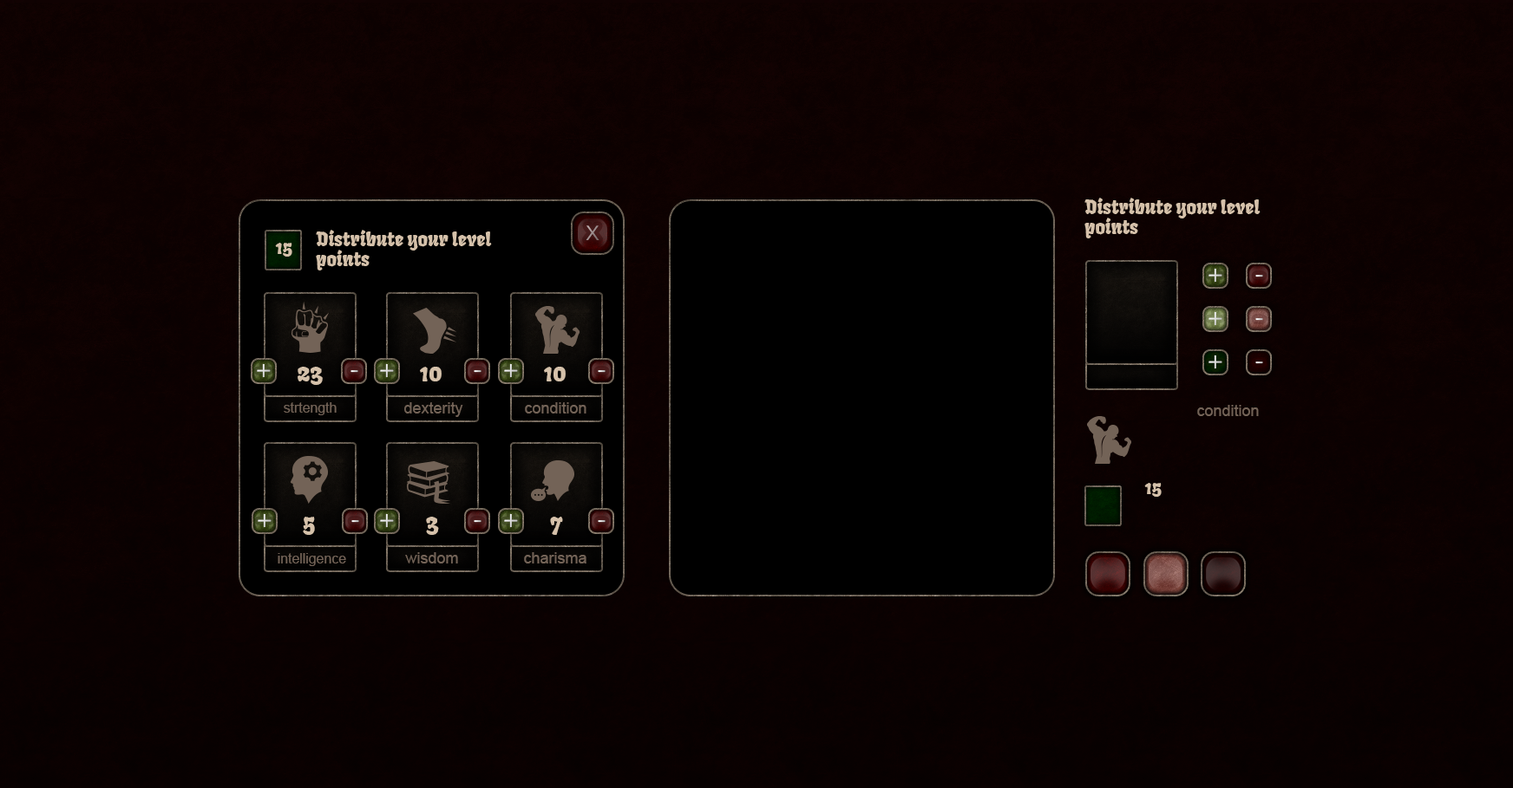
<style>
.page{position:relative;width:1513px;height:788px}
.page>*{position:absolute;margin:0}
.t1{font:19.1px/19.6px "Fruktur-Regular";color:#d5c1aa}
.t2{font:19.2px "Fruktur-Regular";color:#d5c1aa}
.t3{font:26.4px "Kalinga";color:#e0e0e0}
.t4{font:26.4px "Kalinga"}
.t5{font:24.3px "Fruktur-Regular";color:#d5c1aa}
.t6{font:13.9px "ArialMT";color:#736357}
.t7{font:15.6px "ArialMT";color:#736357}
</style>
<div class="page">
<p class="t1" style="left:1084px;top:198px;width:176px;height:41px">Distribute your level<br>points</p>
<p class="t1" style="left:316px;top:230px;width:176px;height:41px">Distribute your level<br>points</p>
<p class="t2" style="left:275px;top:243px;width:17px;height:14px">15</p>
<p class="t3" style="left:1208px;top:268px;width:14px;height:15px">+</p>
<p class="t4" style="left:1255px;top:275px;width:8px;height:3px">-</p>
<p class="t3" style="left:1208px;top:311px;width:14px;height:15px">+</p>
<p class="t4" style="left:1255px;top:318px;width:8px;height:3px">-</p>
<p class="t3" style="left:257px;top:363px;width:14px;height:15px">+</p>
<p class="t3" style="left:380px;top:363px;width:14px;height:15px">+</p>
<p class="t3" style="left:504px;top:363px;width:14px;height:15px">+</p>
<p class="t3" style="left:1208px;top:355px;width:14px;height:14px">+</p>
<p class="t4" style="left:1255px;top:362px;width:8px;height:2px">-</p>
<p class="t5" style="left:297px;top:367px;width:26px;height:18px">23</p>
<p class="t4" style="left:350px;top:370px;width:8px;height:3px">-</p>
<p class="t5" style="left:420px;top:367px;width:21px;height:15px">10</p>
<p class="t4" style="left:474px;top:370px;width:7px;height:3px">-</p>
<p class="t5" style="left:544px;top:367px;width:21px;height:15px">10</p>
<p class="t4" style="left:598px;top:370px;width:7px;height:3px">-</p>
<p class="t6" style="left:284px;top:402px;width:53px;height:13px">strtength</p>
<p class="t7" style="left:404px;top:402px;width:59px;height:15px">dexterity</p>
<p class="t7" style="left:525px;top:402px;width:61px;height:12px">condition</p>
<p class="t7" style="left:1197px;top:405px;width:61px;height:11px">condition</p>
<p class="t2" style="left:1144px;top:483px;width:17px;height:14px">15</p>
<p class="t3" style="left:258px;top:513px;width:13px;height:15px">+</p>
<p class="t5" style="left:303px;top:517px;width:12px;height:18px">5</p>
<p class="t4" style="left:351px;top:520px;width:8px;height:3px">-</p>
<p class="t3" style="left:380px;top:513px;width:14px;height:15px">+</p>
<p class="t5" style="left:426px;top:517px;width:13px;height:18px">3</p>
<p class="t4" style="left:474px;top:520px;width:7px;height:3px">-</p>
<p class="t3" style="left:504px;top:513px;width:14px;height:15px">+</p>
<p class="t5" style="left:550px;top:517px;width:13px;height:18px">7</p>
<p class="t4" style="left:598px;top:520px;width:7px;height:3px">-</p>
<p class="t6" style="left:278px;top:553px;width:68px;height:13px">intelligence</p>
<p class="t7" style="left:405px;top:552px;width:53px;height:12px">wisdom</p>
<p class="t7" style="left:524px;top:552px;width:62px;height:12px">charisma</p>
</div>
